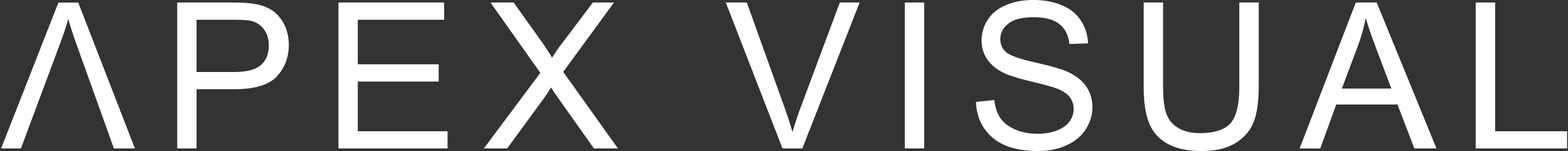
<style>
.page{position:relative;width:1568px;height:151px;background:#333333}
.page>*{position:absolute;margin:0}
.t1{font:204.2px "ArialMT";letter-spacing:0.12em;color:#ffffff}
</style>
<div class="page">
<p class="t1" style="left:1px;top:3px;width:134px;height:146px;rotate:180deg">V</p>
<p class="t1" style="left:177px;top:0px;width:1390px;height:151px">PEX VISUAL</p>
</div>
